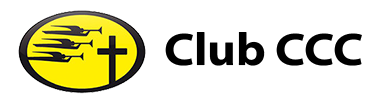
<style>
.page{position:relative;width:384px;height:98px;background:#ffffff}
.page>*{position:absolute;margin:0}
.t1{font:45.8px "MyriadConceptRoman-BoldSemiExtended";color:#000000}
</style>
<div class="page">
<p class="t1" style="left:165px;top:32px;width:197px;height:34px">Club CCC</p>
</div>
